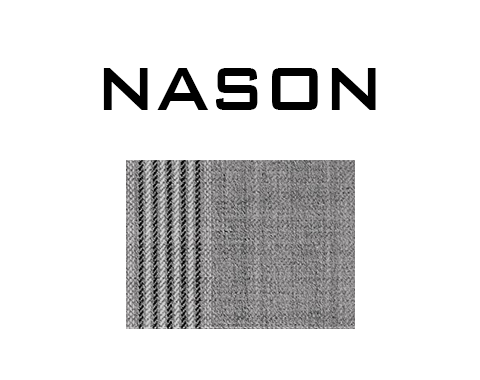
<style>
.page{position:relative;width:480px;height:380px;background:#ffffff}
.page>*{position:absolute;margin:0}
.t1{font:99.6px "BankGothicBT-Medium";color:#000000;scale:0.84 1}
</style>
<div class="page">
<p class="t1" style="left:103px;top:68px;width:273px;height:42px">nason</p>
</div>
